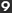
<style>
.page{position:relative;width:12px;height:13px}
.page>*{position:absolute;margin:0}
.t1{font:13.9px "K2D-ExtraBold";color:#ffffff}
</style>
<div class="page">
<p class="t1" style="left:1px;top:1px;width:9px;height:10px">9</p>
</div>
